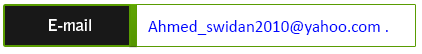
<style>
.page{position:relative;width:422px;height:54px;background:#ffffff}
.page>*{position:absolute;margin:0}
.t1{font:17px "Calibri";color:#0107ff}
</style>
<div class="page">
<p class="t1" style="left:148px;top:20px;width:240px;height:15px">Ahmed_swidan2010@yahoo.com .</p>
</div>
